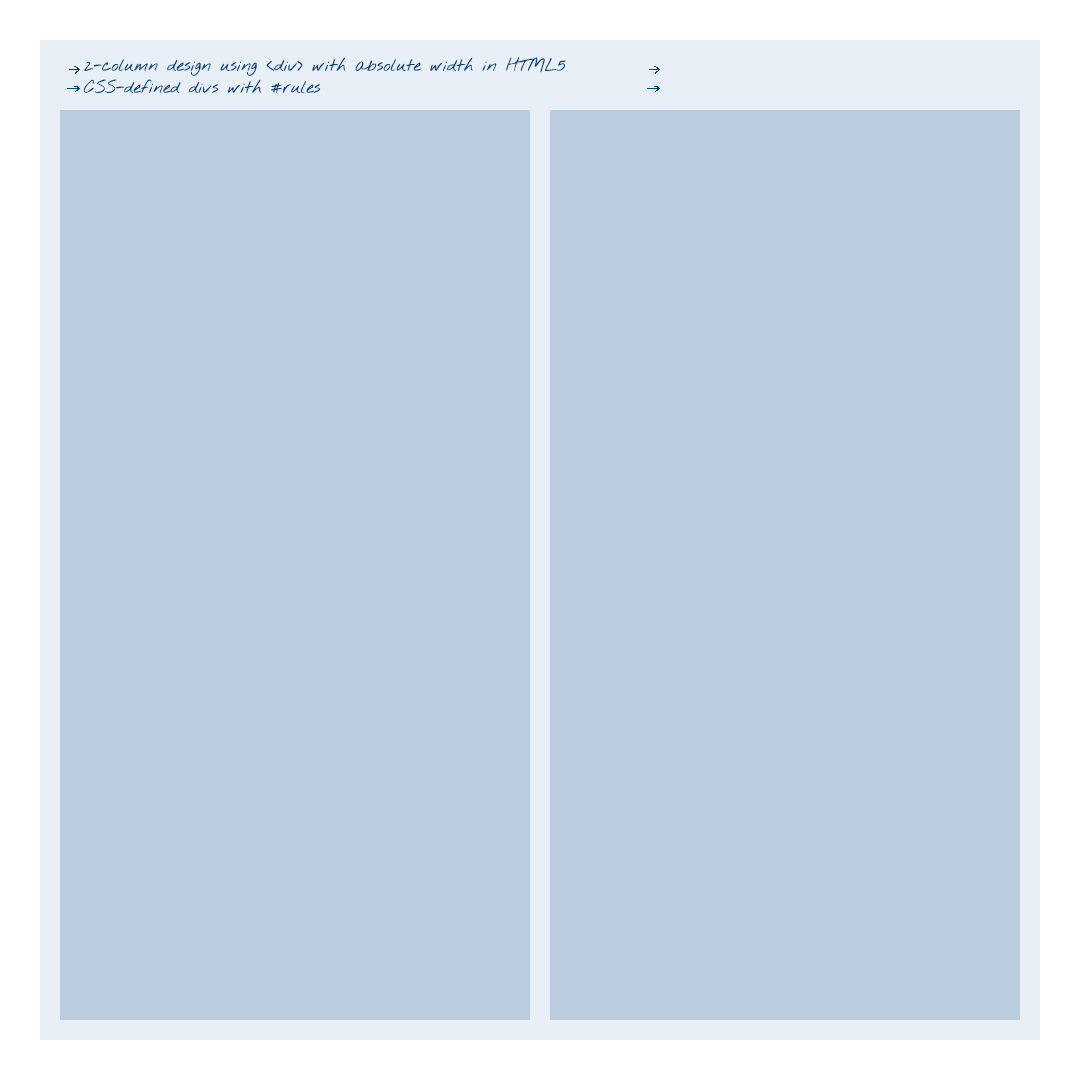
<style>
.page{position:relative;width:1080px;height:1080px;background:#bacddf}
.page>*{position:absolute;margin:0}
.t1{font:14px "NothingYouCouldDo";color:#004580}
</style>
<div class="page">
<p class="t1" style="left:84px;top:57px;width:482px;height:19px">2-column design using &lt;div&gt; with absolute width in HTML5</p>
<p class="t1" style="left:83px;top:79px;width:238px;height:14px">CSS-defined divs with #rules</p>
</div>
